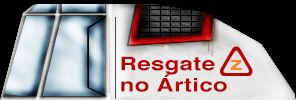
<style>
.page{position:relative;width:296px;height:100px;background:#010101}
.page>*{position:absolute;margin:0}
.t1{font:18.7px/21.3px "Helvetica-Bold";letter-spacing:0.02em;color:#b30505;scale:1.27 1}
</style>
<div class="page">
<p class="t1" style="left:121px;top:56px;width:106px;height:36px">Resgate<br>no Ártico</p>
</div>
